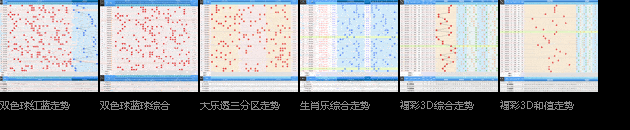
<style>
.page{position:relative;width:630px;height:130px;background:#000000}
.page>*{position:absolute;margin:0}
.t1{font:10px "MicrosoftYaHei";color:#888888}
</style>
<div class="page">
<p class="t1" style="left:0px;top:100px;width:70px;height:10px">双色球红蓝走势</p>
<p class="t1" style="left:100px;top:100px;width:70px;height:10px">双色球蓝球综合</p>
<p class="t1" style="left:200px;top:100px;width:80px;height:10px">大乐透三分区走势</p>
<p class="t1" style="left:300px;top:101px;width:70px;height:9px">生肖乐综合走势</p>
<p class="t1" style="left:400px;top:100px;width:74px;height:10px">福彩3D综合走势</p>
<p class="t1" style="left:500px;top:100px;width:74px;height:10px">福彩3D和值走势</p>
</div>
